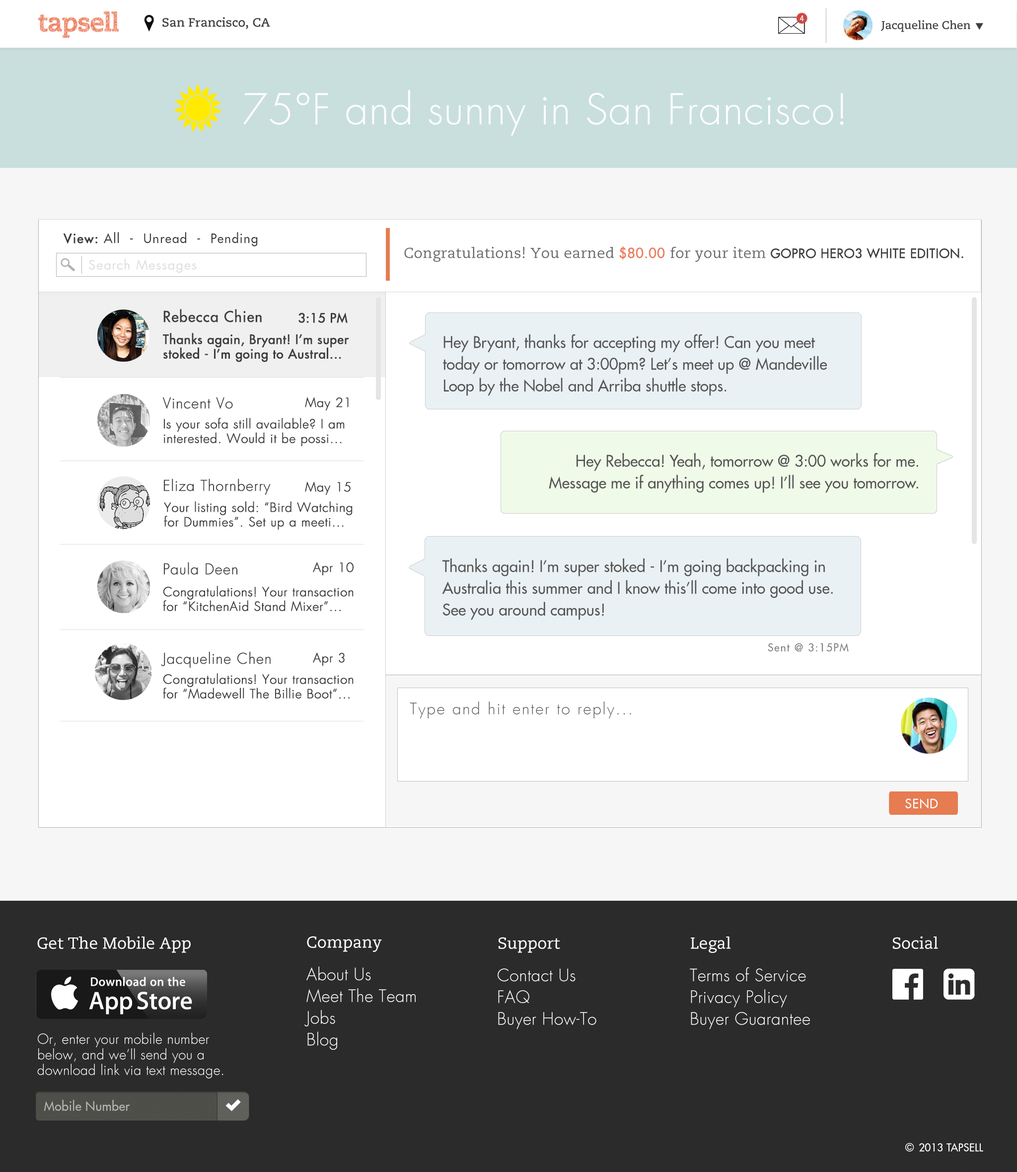
<style>
.page{position:relative;width:1017px;height:1172px;background:#ffffff}
.page>*{position:absolute;margin:0}
.t1{font:12.3px "CaeciliaLTStd-Bold";color:#3e3e3e}
.t2{font:8.1px "Roboto-Regular";color:#ffffff}
.t3{font:11.3px "CaeciliaLTStd-Bold";color:#3e3e3e}
.t4{font:41.4px "FuturaLight";letter-spacing:0.02em;color:#ffffff}
.t5{font:12.4px "FuturaExtended";letter-spacing:0.07em;color:#3e3e3e}
.t6{font:12.4px "FuturaExtended";letter-spacing:0.07em;color:#3e3e3e;font-weight:bold}
.t7{font:14.4px "CaeciliaLTStd-Roman";letter-spacing:0.02em;color:#696969}
.t8{font:13.5px "FuturaExtended";letter-spacing:0.02em;color:#eb7e5d;font-weight:bold}
.t9{font:12.4px "FuturaExtended";letter-spacing:0.02em;color:#3e3e3e;font-weight:bold}
.t10{font:14.4px "CaeciliaLTStd-Roman";letter-spacing:0.02em;color:#3e3e3e}
.t11{font:12.4px "FuturaLight";letter-spacing:0.07em;color:#dddddd;font-weight:bold}
.t12{font:14.5px "FuturaExtended";letter-spacing:0.025em;color:#3e3e3e;font-weight:bold}
.t13{font:12.4px "FuturaExtended";letter-spacing:0.025em;color:#3e3e3e;font-weight:bold}
.t14{font:12.4px/14.5px "FuturaExtended";letter-spacing:0.025em;color:#3e3e3e;font-weight:bold}
.t15{font:15.5px/21.7px "FuturaExtended";color:#555555}
.t16{font:14.5px "FuturaLight";letter-spacing:0.025em;color:#3e3e3e;font-weight:bold}
.t17{font:12.4px "FuturaLight";letter-spacing:0.025em;color:#3e3e3e;font-weight:bold}
.t18{font:12.4px/14.5px "FuturaLight";letter-spacing:0.025em;color:#3e3e3e;font-weight:bold}
.t19{font:10.6px "FuturaExtended";letter-spacing:0.09em;color:#7c7c7c}
.t20{font:15.5px "FuturaLight";letter-spacing:0.09em;color:#555555}
.t21{font:12.4px "FuturaExtended";letter-spacing:0.05em;color:#ffffff}
.t22{font:10.4px "FuturaExtended";letter-spacing:0.02em;color:#ffffff}
</style>
<div class="page">
<p class="t1" style="left:162px;top:17px;width:108px;height:12px">San Francisco, CA</p>
<p class="t2" style="left:800px;top:15px;width:4px;height:6px">4</p>
<p class="t3" style="left:881px;top:20px;width:90px;height:12px">Jacqueline Chen</p>
<p class="t4" style="left:243px;top:90px;width:601px;height:46px">75°F and sunny in San Francisco!</p>
<p class="t5" style="left:63px;top:232px;width:195px;height:14px"><span class="t6">View:</span> All  -  Unread  -  Pending</p>
<p class="t7" style="left:404px;top:246px;width:560px;height:16px">Congratulations! You earned <span class="t8">$80.00 </span>for your item <span class="t9">GOPRO HERO3 WHITE EDITION</span><span class="t10">.</span></p>
<p class="t11" style="left:89px;top:259px;width:108px;height:14px">Search Messages</p>
<p class="t12" style="left:163px;top:309px;width:99px;height:13px">Rebecca Chien</p>
<p class="t13" style="left:299px;top:312px;width:49px;height:11px">3:15 PM</p>
<p class="t14" style="left:163px;top:333px;width:186px;height:29px">Thanks again, Bryant! I’m super<br>stoked - I’m going to Austral...</p>
<p class="t15" style="left:443px;top:334px;width:385px;height:62px">Hey Bryant, thanks for accepting my offer! Can you meet<br>today or tomorrow at 3:00pm? Let’s meet up @ Mandeville<br>Loop by the Nobel and Arriba shuttle stops.</p>
<p class="t16" style="left:162px;top:397px;width:71px;height:12px">Vincent Vo</p>
<p class="t17" style="left:305px;top:397px;width:44px;height:13px">May 21</p>
<p class="t18" style="left:163px;top:418px;width:182px;height:29px">Is your sofa still available? I am <br>interested. Would it be possi...</p>
<p class="t15" style="left:549px;top:453px;width:370px;height:40px;text-align:right">Hey Rebecca! Yeah, tomorrow @ 3:00 works for me.<br>Message me if anything comes up! I’ll see you tomorrow.</p>
<p class="t16" style="left:164px;top:478px;width:107px;height:17px">Eliza Thornberry</p>
<p class="t17" style="left:305px;top:481px;width:46px;height:14px">May 15</p>
<p class="t18" style="left:164px;top:501px;width:189px;height:29px">Your listing sold: “Bird Watching<br>for Dummies”. Set up a meeti...</p>
<p class="t16" style="left:164px;top:562px;width:73px;height:13px">Paula Deen</p>
<p class="t17" style="left:313px;top:562px;width:41px;height:13px">Apr 10</p>
<p class="t15" style="left:442px;top:558px;width:391px;height:62px">Thanks again! I’m super stoked - I’m going backpacking in <br>Australia this summer and I know this’ll come into good use.<br>See you around campus!</p>
<p class="t18" style="left:163px;top:586px;width:191px;height:25px">Congratulations! Your transaction<br>for “KitchenAid Stand Mixer”...</p>
<p class="t16" style="left:161px;top:651px;width:110px;height:17px">Jacqueline Chen</p>
<p class="t17" style="left:313px;top:652px;width:32px;height:14px">Apr 3</p>
<p class="t19" style="left:768px;top:643px;width:81px;height:9px">Sent @ 3:15PM</p>
<p class="t18" style="left:163px;top:673px;width:191px;height:26px">Congratulations! Your transaction<br>for “Madewell The Billie Boot”...</p>
<p class="t20" style="left:410px;top:701px;width:221px;height:17px">Type and hit enter to reply...</p>
<p class="t21" style="left:906px;top:798px;width:32px;height:11px">SEND</p>
<p class="t22" style="left:920px;top:1143px;width:64px;height:9px">2013 TAPSELL</p>
</div>
